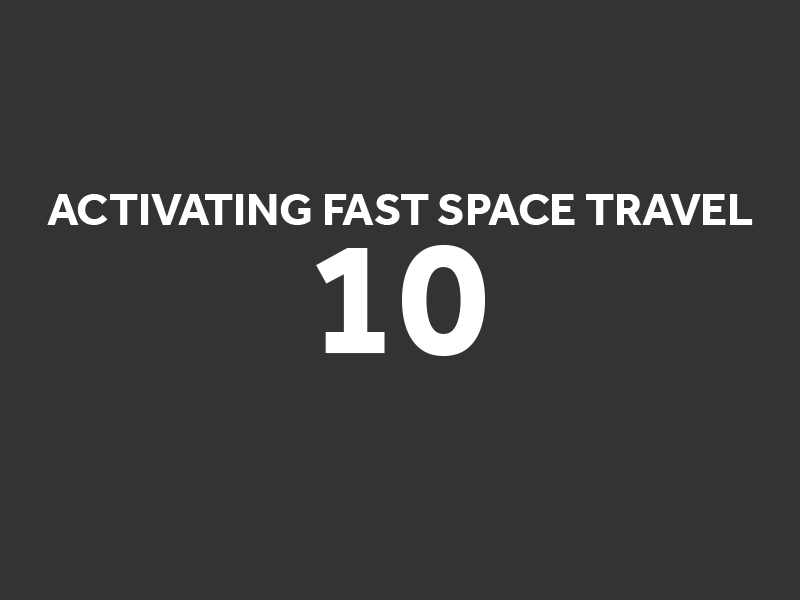
<style>
.page{position:relative;width:800px;height:600px;background:#333333}
.page>*{position:absolute;margin:0}
.t1{font:46.5px "Effra-Bold";color:#ffffff}
.t2{font:166.7px "Effra-Bold";color:#ffffff}
</style>
<div class="page">
<p class="t1" style="left:47px;top:194px;width:706px;height:31px">ACTIVATING FAST SPACE TRAVEL</p>
<p class="t2" style="left:316px;top:245px;width:169px;height:111px">10</p>
</div>
